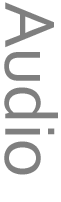
<style>
.page{position:relative;width:61px;height:202px;background:#ffffff}
.page>*{position:absolute;margin:0}
.t1{font:74.6px "Corbel";letter-spacing:-0.02em;color:#7f7f7f}
</style>
<div class="page">
<p class="t1" style="left:4px;top:2px;width:54px;height:173px;rotate:90deg">Audio</p>
</div>
